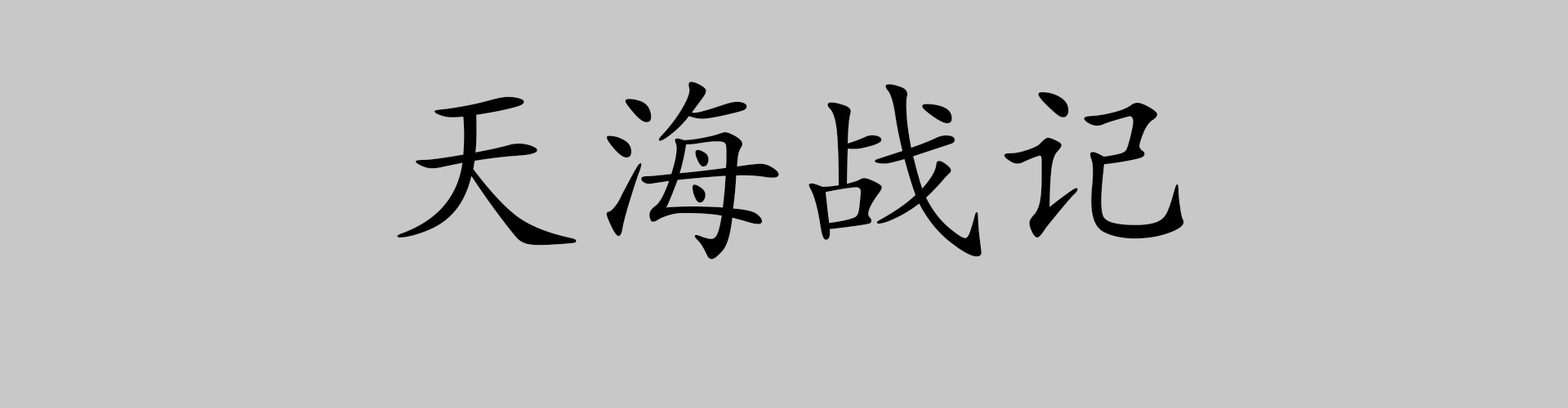
<style>
.page{position:relative;width:1568px;height:408px;background:#c8c8c8}
.page>*{position:absolute;margin:0}
.t1{font:204.2px "STKaiti";color:#000000}
</style>
<div class="page">
<p class="t1" style="left:397px;top:82px;width:787px;height:178px">天海战记</p>
</div>
